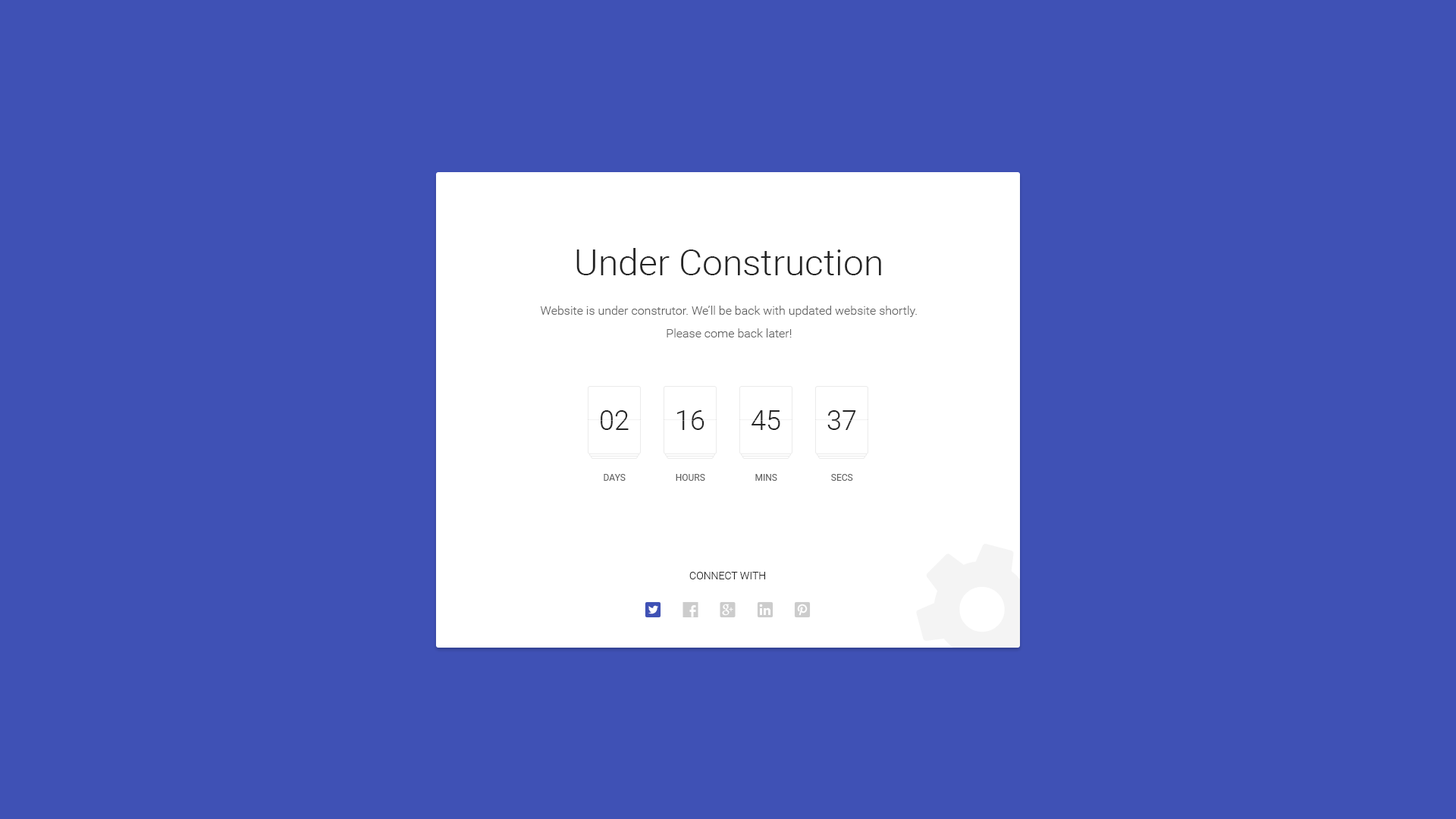
<style>
.page{position:relative;width:1456px;height:819px;background:#3f51b5}
.page>*{position:absolute;margin:0}
.t1{font:36.4px "Roboto-Light";color:#252525}
.t2{font:12.1px/22.7px "Roboto-Light";color:#636363}
.t3{font:27.3px "Roboto-Light";color:#252525;text-transform:uppercase}
.t4{font:9.1px "Roboto-Regular";color:#636363;text-transform:uppercase}
.t5{font:10.6px "Roboto-Light";color:#252525;text-transform:uppercase}
</style>
<div class="page">
<p class="t1" style="left:576px;top:248px;width:305px;height:27px">Under Construction</p>
<p class="t2" style="left:540px;top:306px;width:377px;height:31px;text-align:center">Website is under construtor. We’ll be back with updated website shortly.<br>Please come back later!</p>
<p class="t3" style="left:601px;top:410px;width:28px;height:20px">02</p>
<p class="t3" style="left:677px;top:410px;width:27px;height:20px">16</p>
<p class="t3" style="left:751px;top:410px;width:29px;height:20px">45</p>
<p class="t3" style="left:827px;top:410px;width:29px;height:20px">37</p>
<p class="t4" style="left:604px;top:474px;width:22px;height:7px">Days</p>
<p class="t4" style="left:676px;top:474px;width:29px;height:7px">Hours</p>
<p class="t4" style="left:755px;top:474px;width:22px;height:7px">Mins</p>
<p class="t4" style="left:831px;top:474px;width:22px;height:7px">Secs</p>
<p class="t5" style="left:689px;top:572px;width:76px;height:7px">Connect with</p>
</div>
